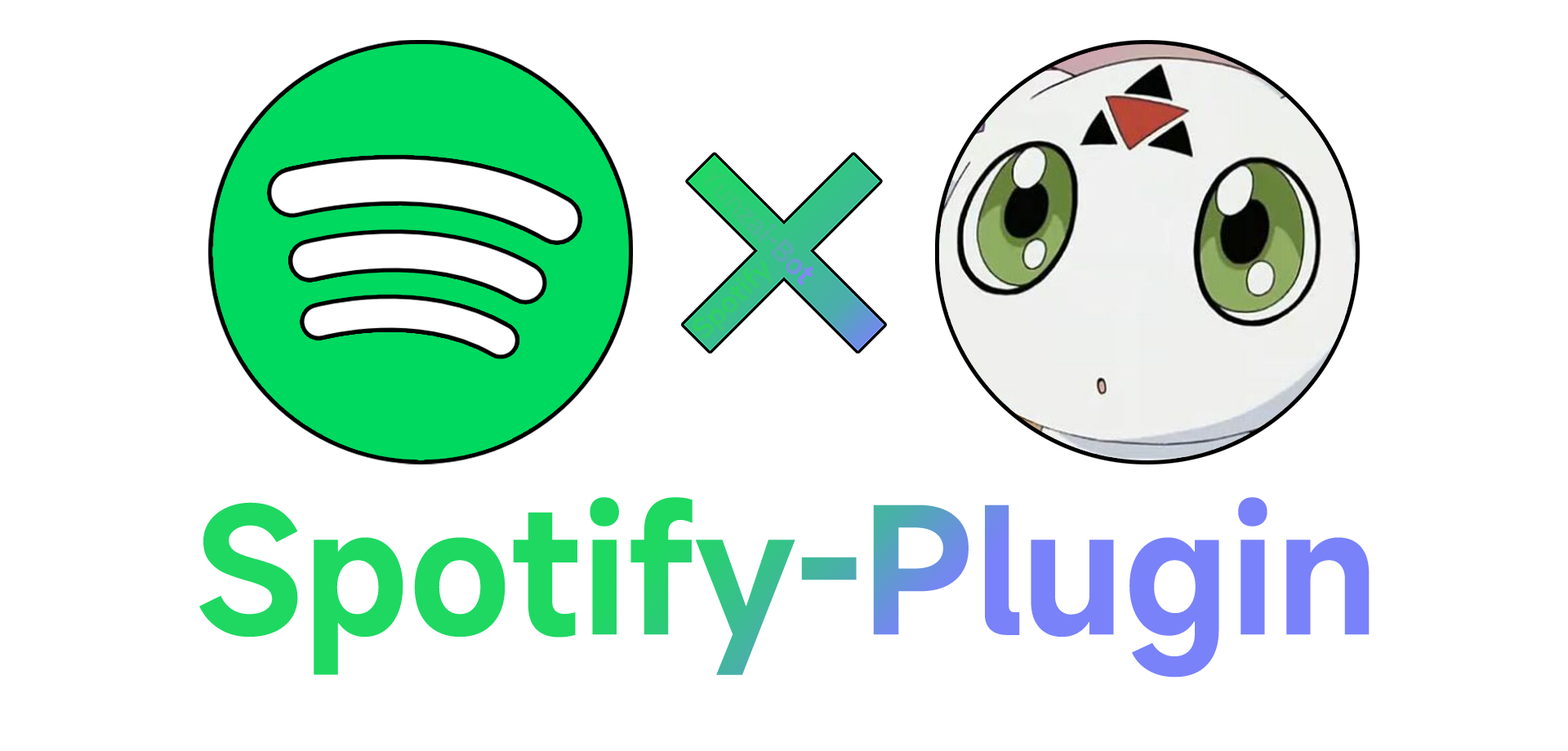
<style>
.page{position:relative;width:1568px;height:751px;background:#ffffff}
.page>*{position:absolute;margin:0}
.t1{font:163.4px "MiSans-Semibold"}
</style>
<div class="page">
<p class="t1" style="left:199px;top:497px;width:1171px;height:181px">Spotify-Plugin</p>
</div>
